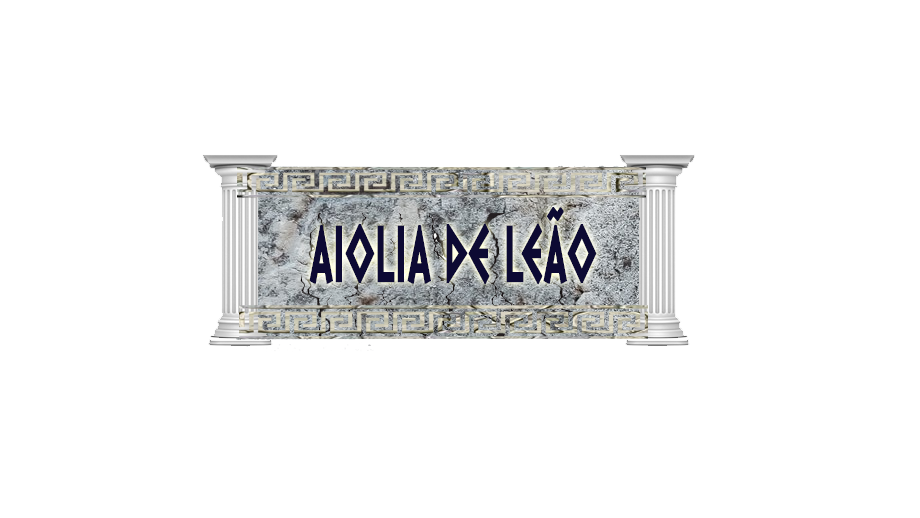
<style>
.page{position:relative;width:920px;height:518px;background:#ffffff}
.page>*{position:absolute;margin:0}
.t1{font:78.5px "DalekPinpointBold";color:#0d0a33;font-weight:bold;scale:0.52 1}
</style>
<div class="page">
<p class="t1" style="left:309px;top:207px;width:288px;height:77px">aiolia de leão</p>
</div>
